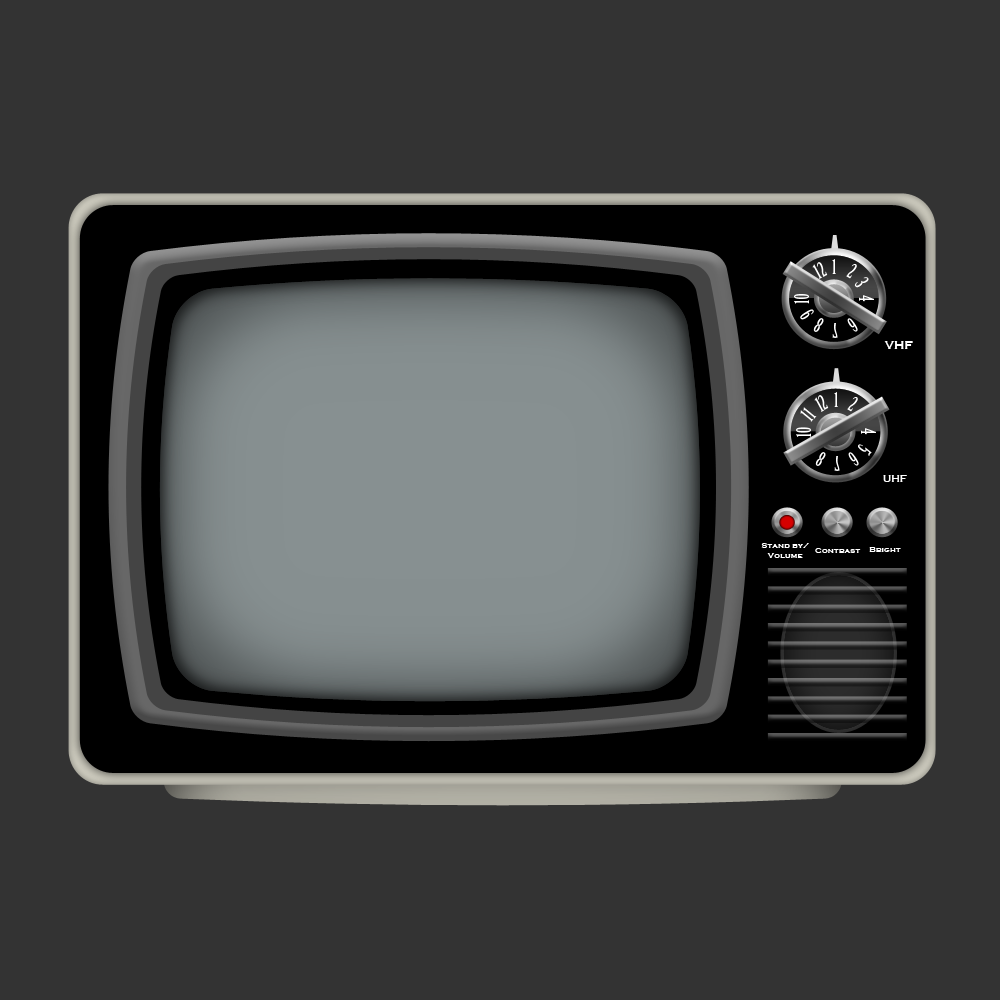
<style>
.page{position:relative;width:1000px;height:1000px;background:#333333}
.page>*{position:absolute;margin:0}
.t1{font:20px "BirchStd";color:#ffffff}
.t2{font:12px "CopperplateGothic-Bold";color:#ffffff}
.t3{font:10px "CopperplateGothic-Bold";color:#ffffff}
.t4{font:8.3px "CopperplateGothic-Bold";color:#ffffff}
</style>
<div class="page">
<p class="t1" style="left:812px;top:262px;width:16px;height:17px;rotate:-28deg">12</p>
<p class="t1" style="left:832px;top:259px;width:4px;height:15px">1</p>
<p class="t1" style="left:846px;top:264px;width:11px;height:15px;rotate:29deg">2</p>
<p class="t1" style="left:854px;top:277px;width:15px;height:11px;rotate:57deg">3</p>
<p class="t1" style="left:794px;top:294px;width:15px;height:10px;rotate:-90deg">10</p>
<p class="t1" style="left:859px;top:295px;width:15px;height:7px;rotate:90deg">4</p>
<p class="t1" style="left:800px;top:309px;width:14px;height:11px;rotate:-122deg">9</p>
<p class="t1" style="left:813px;top:318px;width:11px;height:14px;rotate:-151deg">8</p>
<p class="t1" style="left:847px;top:318px;width:11px;height:14px;rotate:147deg">6</p>
<p class="t1" style="left:832px;top:323px;width:6px;height:15px">7</p>
<p class="t2" style="left:884px;top:341px;width:29px;height:8px">VHF</p>
<p class="t1" style="left:814px;top:395px;width:15px;height:17px;rotate:-28deg">12</p>
<p class="t1" style="left:834px;top:392px;width:4px;height:15px">1</p>
<p class="t1" style="left:847px;top:397px;width:11px;height:15px;rotate:29deg">2</p>
<p class="t1" style="left:800px;top:407px;width:17px;height:15px;rotate:-51deg">11</p>
<p class="t1" style="left:796px;top:427px;width:15px;height:10px;rotate:-90deg">10</p>
<p class="t1" style="left:861px;top:428px;width:15px;height:7px;rotate:90deg">4</p>
<p class="t1" style="left:858px;top:444px;width:14px;height:12px;rotate:126deg">5</p>
<p class="t1" style="left:815px;top:452px;width:11px;height:14px;rotate:-151deg">8</p>
<p class="t1" style="left:834px;top:456px;width:6px;height:15px">7</p>
<p class="t1" style="left:848px;top:452px;width:11px;height:14px;rotate:147deg">6</p>
<p class="t3" style="left:883px;top:475px;width:24px;height:7px">UHF</p>
<p class="t4" style="left:761px;top:543px;width:48px;height:15px;text-align:center">Stand by/<br>Volume</p>
<p class="t4" style="left:815px;top:548px;width:46px;height:5px">Contrast</p>
<p class="t4" style="left:869px;top:547px;width:32px;height:5px">Bright</p>
</div>
